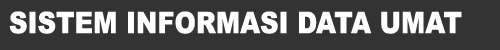
<style>
.page{position:relative;width:500px;height:50px;background:#333333}
.page>*{position:absolute;margin:0}
.t1{font:29.8px "Arial-Black";color:#ffffff;scale:0.86 1}
</style>
<div class="page">
<p class="t1" style="left:9px;top:11px;width:453px;height:23px">SISTEM INFORMASI DATA UMAT</p>
</div>
